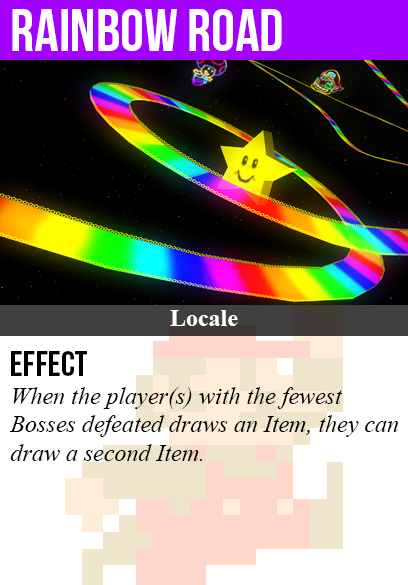
<style>
.page{position:relative;width:408px;height:585px;background:#ffffff}
.page>*{position:absolute;margin:0}
.t1{font:60px "BebasNeue";color:#ffffff}
.t2{font:24px "TimesNewRomanPS-BoldMT";color:#ffffff}
.t3{font:36px "BebasNeue";color:#000000}
.t4{font:24px "TimesNewRomanPS-ItalicMT";color:#000000}
</style>
<div class="page">
<p class="t1" style="left:12px;top:9px;width:270px;height:42px">rainbow road</p>
<p class="t2" style="left:170px;top:310px;width:68px;height:16px">Locale</p>
<p class="t3" style="left:11px;top:351px;width:76px;height:25px">Effect</p>
<p class="t4" style="left:9px;top:387px;width:389px;height:74px">When the player(s) with the fewest<br>Bosses defeated draws an Item, they can<br>draw a second Item.</p>
</div>
